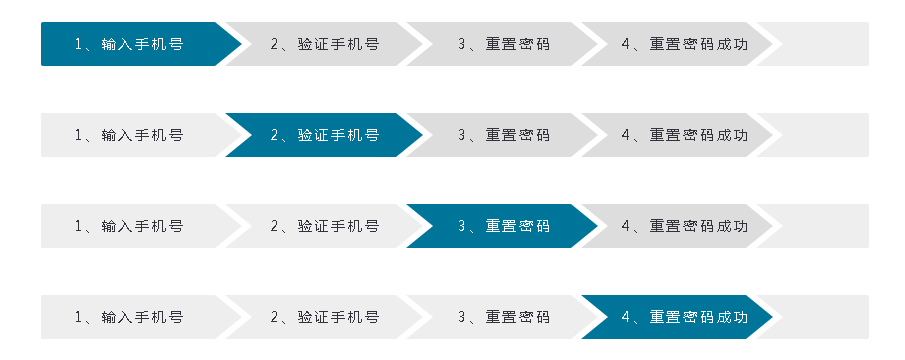
<style>
.page{position:relative;width:905px;height:360px;background:#ffffff}
.page>*{position:absolute;margin:0}
.t1{font:14px "MicrosoftYaHei";letter-spacing:0.2em;color:#ffffff}
.t2{font:14px "MicrosoftYaHei";letter-spacing:0.2em;color:#32323a}
</style>
<div class="page">
<p class="t1" style="left:76px;top:38px;width:107px;height:13px">1、输入手机号</p>
<p class="t2" style="left:271px;top:38px;width:108px;height:13px">2、验证手机号</p>
<p class="t2" style="left:459px;top:37px;width:90px;height:14px">3、重置密码</p>
<p class="t2" style="left:622px;top:37px;width:125px;height:14px">4、重置密码成功</p>
<p class="t2" style="left:76px;top:129px;width:107px;height:13px">1、输入手机号</p>
<p class="t1" style="left:271px;top:129px;width:108px;height:13px">2、验证手机号</p>
<p class="t2" style="left:459px;top:128px;width:90px;height:14px">3、重置密码</p>
<p class="t2" style="left:622px;top:128px;width:125px;height:14px">4、重置密码成功</p>
<p class="t2" style="left:76px;top:220px;width:107px;height:13px">1、输入手机号</p>
<p class="t2" style="left:271px;top:220px;width:108px;height:13px">2、验证手机号</p>
<p class="t1" style="left:459px;top:219px;width:90px;height:14px">3、重置密码</p>
<p class="t2" style="left:622px;top:219px;width:125px;height:14px">4、重置密码成功</p>
<p class="t2" style="left:76px;top:311px;width:107px;height:13px">1、输入手机号</p>
<p class="t2" style="left:271px;top:311px;width:108px;height:13px">2、验证手机号</p>
<p class="t2" style="left:459px;top:310px;width:90px;height:14px">3、重置密码</p>
<p class="t1" style="left:622px;top:310px;width:125px;height:14px">4、重置密码成功</p>
</div>
